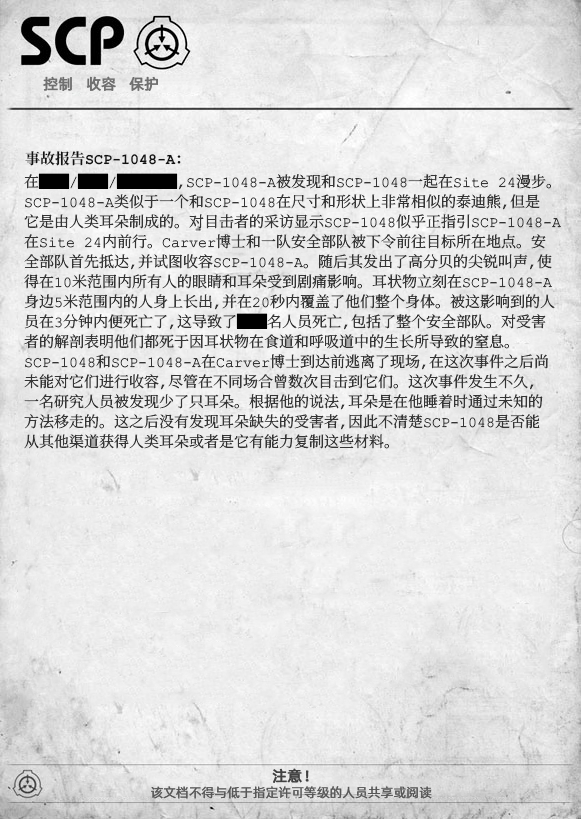
<style>
.page{position:relative;width:581px;height:819px}
.page>*{position:absolute;margin:0}
.t1{font:15px "AlibabaPuHuiTiR";color:#707070;font-weight:bold}
.t2{font:15px "ContainmentBreach-Bold";color:#121212}
.t3{font:15px/20px "ContainmentBreach-Regular";color:#353535}
.t4{font:15px/20px "ContainmentBreach-Regular";color:#000000}
.t5{font:15px "AlibabaPuHuiTiR";color:#414141;font-weight:bold}
.t6{font:13px "AlibabaPuHuiTiR";color:#575757}
</style>
<div class="page">
<p class="t1" style="left:43px;top:76px;width:115px;height:15px">控制   收容   保护</p>
<p class="t2" style="left:25px;top:151px;width:156px;height:15px">事故报告SCP-1048-A：</p>
<p class="t3" style="left:24px;top:173px;width:537px;height:276px">在<span class="t4">██</span>/<span class="t4">██</span>/<span class="t4">████</span>,SCP-1048-A被发现和SCP-1048一起在Site 24漫步。<br>SCP-1048-A类似于一个和SCP-1048在尺寸和形状上非常相似的泰迪熊，但是<br>它是由人类耳朵制成的。对目击者的采访显示SCP-1048似乎正指引SCP-1048-A<br>在Site 24内前行。Carver博士和一队安全部队被下令前往目标所在地点。安<br>全部队首先抵达，并试图收容SCP-1048-A。随后其发出了高分贝的尖锐叫声，使<br>得在10米范围内所有人的眼睛和耳朵受到剧痛影响。耳状物立刻在SCP-1048-A<br>身边5米范围内的人身上长出，并在20秒内覆盖了他们整个身体。被这影响到的人<br>员在3分钟内便死亡了，这导致了<span class="t4">██</span>名人员死亡，包括了整个安全部队。对受害<br>者的解剖表明他们都死于因耳状物在食道和呼吸道中的生长所导致的窒息。<br>SCP-1048和SCP-1048-A在Carver博士到达前逃离了现场，在这次事件之后尚<br>未能对它们进行收容，尽管在不同场合曾数次目击到它们。这次事件发生不久，<br>一名研究人员被发现少了只耳朵。根据他的说法，耳朵是在他睡着时通过未知的<br>方法移走的。这之后没有发现耳朵缺失的受害者，因此不清楚SCP-1048是否能<br>从其他渠道获得人类耳朵或者是它有能力复制这些材料。</p>
<p class="t5" style="left:272px;top:768px;width:37px;height:15px">注意！</p>
<p class="t6" style="left:151px;top:786px;width:281px;height:13px">该文档不得与低于指定许可等级的人员共享或阅读</p>
</div>
